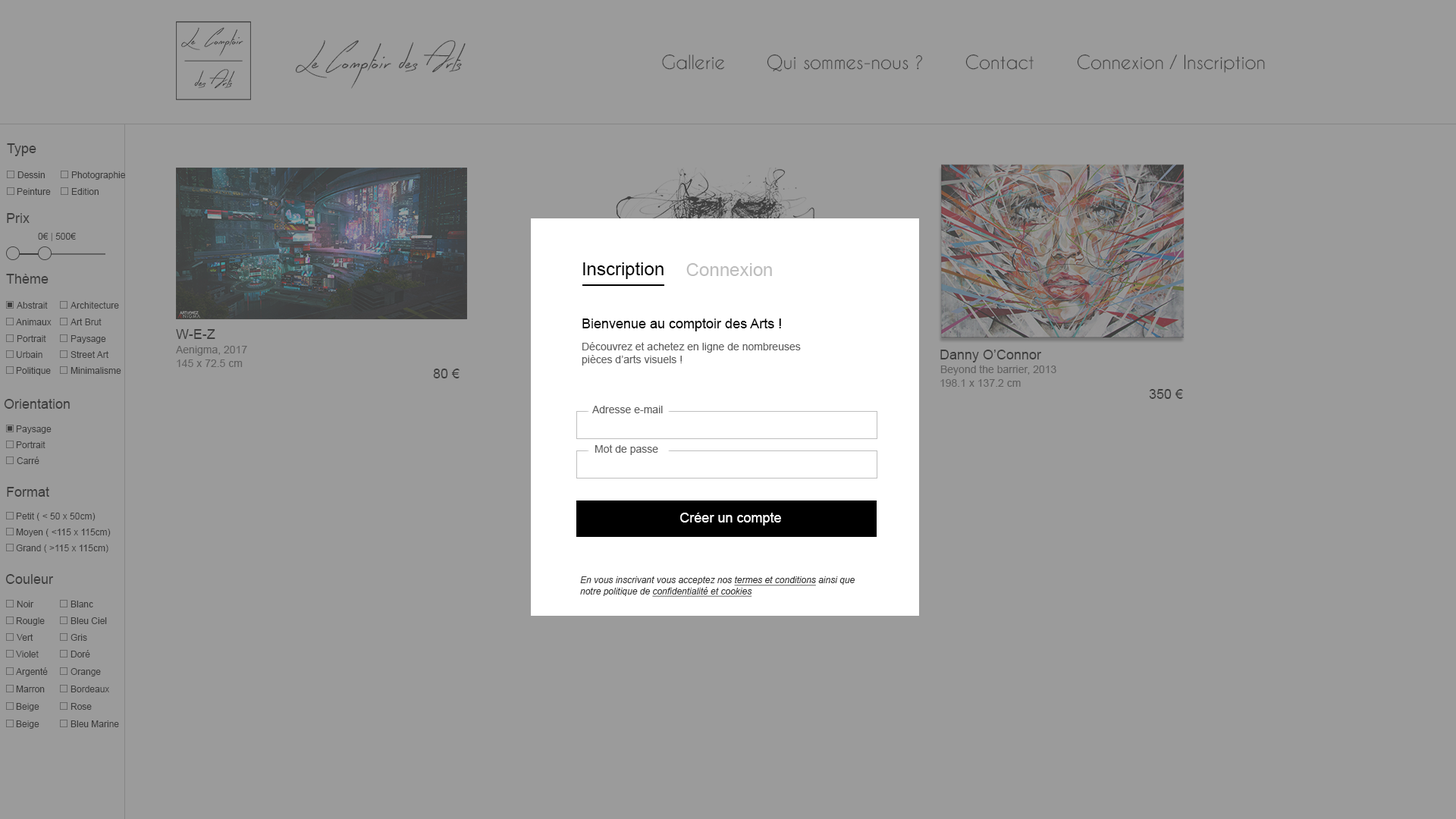
<style>
.page{position:relative;width:1456px;height:819px;background:#9b9b9b}
.page>*{position:absolute;margin:0}
.t1{font:33.4px "EarlyBird";color:#3d3d3d}
.t2{font:18.2px "CaviarDreams";color:#3d3d3d}
.t3{font:13.6px "ArialMT";color:#3d3d3d}
.t4{font:9.1px "ArialMT";color:#3d3d3d}
.t5{font:18.2px "ArialMT";color:#000000}
.t6{font:18.2px "ArialMT";color:#bebebe}
.t7{font:13.6px "ArialMT";color:#000000}
.t8{font:10.6px "ArialMT";color:#616161}
.t9{font:13.6px "ArialMT";color:#ffffff}
.t10{font:9.1px "Arial-ItalicMT";color:#363636}
.t11{font:9.1px "Arial-ItalicMT";color:#363636;text-decoration:underline}
</style>
<div class="page">
<p class="t1" style="left:295px;top:40px;width:171px;height:49px">Le Comptoir des Arts</p>
<p class="t2" style="left:662px;top:54px;width:63px;height:16px">Gallerie</p>
<p class="t2" style="left:767px;top:54px;width:156px;height:18px">Qui sommes-nous ?</p>
<p class="t2" style="left:965px;top:54px;width:69px;height:16px">Contact</p>
<p class="t2" style="left:1077px;top:54px;width:188px;height:19px">Connexion / Inscription</p>
<p class="t3" style="left:7px;top:143px;width:29px;height:13px">Type</p>
<p class="t4" style="left:17px;top:171px;width:28px;height:7px">Dessin</p>
<p class="t4" style="left:71px;top:171px;width:54px;height:9px">Photographie</p>
<p class="t4" style="left:17px;top:188px;width:34px;height:7px">Peinture</p>
<p class="t4" style="left:71px;top:188px;width:28px;height:7px">Edition</p>
<p class="t3" style="left:7px;top:213px;width:23px;height:10px">Prix</p>
<p class="t4" style="left:38px;top:233px;width:38px;height:8px">0€ | 500€</p>
<p class="t5" style="left:583px;top:262px;width:81px;height:17px">Inscription</p>
<p class="t6" style="left:686px;top:263px;width:86px;height:13px">Connexion</p>
<p class="t3" style="left:6px;top:274px;width:43px;height:10px">Thème</p>
<p class="t4" style="left:17px;top:302px;width:31px;height:7px">Abstrait</p>
<p class="t4" style="left:71px;top:302px;width:48px;height:7px">Architecture</p>
<p class="t4" style="left:16px;top:318px;width:36px;height:7px">Animaux</p>
<p class="t4" style="left:71px;top:318px;width:31px;height:7px">Art Brut</p>
<p class="t3" style="left:176px;top:329px;width:39px;height:10px">W-E-Z</p>
<p class="t7" style="left:582px;top:318px;width:199px;height:13px">Bienvenue au comptoir des Arts !</p>
<p class="t4" style="left:17px;top:335px;width:29px;height:7px">Portrait</p>
<p class="t4" style="left:71px;top:335px;width:35px;height:9px">Paysage</p>
<p class="t4" style="left:16px;top:351px;width:26px;height:7px">Urbain</p>
<p class="t4" style="left:71px;top:351px;width:37px;height:7px">Street Art</p>
<p class="t8" style="left:176px;top:346px;width:71px;height:10px">Aenigma, 2017</p>
<p class="t8" style="left:582px;top:342px;width:219px;height:24px">Découvrez et achetez en ligne de nombreuses pièces d’arts visuels !</p>
<p class="t3" style="left:940px;top:350px;width:102px;height:12px">Danny O’Connor</p>
<p class="t8" style="left:177px;top:359px;width:66px;height:8px">145 x 72.5 cm</p>
<p class="t8" style="left:940px;top:365px;width:116px;height:10px">Beyond the barrier, 2013</p>
<p class="t4" style="left:16px;top:367px;width:35px;height:8px">Politique</p>
<p class="t4" style="left:71px;top:367px;width:50px;height:7px">Minimalisme</p>
<p class="t3" style="left:433px;top:369px;width:27px;height:9px">80 €</p>
<p class="t8" style="left:940px;top:379px;width:81px;height:8px">198.1 x 137.2 cm</p>
<p class="t3" style="left:1149px;top:389px;width:34px;height:10px">350 €</p>
<p class="t3" style="left:4px;top:399px;width:66px;height:10px">Orientation</p>
<p class="t8" style="left:592px;top:406px;width:71px;height:7px">Adresse e-mail</p>
<p class="t4" style="left:16px;top:425px;width:36px;height:9px">Paysage</p>
<p class="t4" style="left:16px;top:441px;width:29px;height:7px">Portrait</p>
<p class="t8" style="left:595px;top:444px;width:63px;height:11px">Mot de passe</p>
<p class="t4" style="left:17px;top:457px;width:22px;height:7px">Carré</p>
<p class="t3" style="left:7px;top:487px;width:42px;height:10px">Format</p>
<p class="t4" style="left:16px;top:513px;width:80px;height:8px">Petit ( &lt; 50 x 50cm)</p>
<p class="t9" style="left:680px;top:513px;width:101px;height:13px">Créer un compte</p>
<p class="t4" style="left:16px;top:529px;width:95px;height:8px">Moyen ( &lt;115 x 115cm)</p>
<p class="t4" style="left:16px;top:544px;width:92px;height:9px">Grand ( &gt;115 x 115cm)</p>
<p class="t3" style="left:5px;top:574px;width:49px;height:10px">Couleur</p>
<p class="t10" style="left:580px;top:576px;width:275px;height:21px">En vous inscrivant vous acceptez nos <span class="t11">termes et conditions</span> ainsi que notre politique de <span class="t11">confidentialité et cookies</span></p>
<p class="t4" style="left:17px;top:601px;width:17px;height:6px">Noir</p>
<p class="t4" style="left:71px;top:601px;width:22px;height:6px">Blanc</p>
<p class="t4" style="left:16px;top:617px;width:29px;height:9px">Rougle</p>
<p class="t4" style="left:71px;top:617px;width:36px;height:7px">Bleu Ciel</p>
<p class="t4" style="left:17px;top:634px;width:16px;height:7px">Vert</p>
<p class="t4" style="left:71px;top:634px;width:16px;height:7px">Gris</p>
<p class="t4" style="left:16px;top:651px;width:23px;height:6px">Violet</p>
<p class="t4" style="left:71px;top:650px;width:19px;height:7px">Doré</p>
<p class="t4" style="left:16px;top:667px;width:32px;height:9px">Argenté</p>
<p class="t4" style="left:71px;top:668px;width:30px;height:8px">Orange</p>
<p class="t4" style="left:16px;top:686px;width:29px;height:6px">Marron</p>
<p class="t4" style="left:71px;top:686px;width:38px;height:6px">Bordeaux</p>
<p class="t4" style="left:16px;top:703px;width:23px;height:8px">Beige</p>
<p class="t4" style="left:71px;top:703px;width:21px;height:7px">Rose</p>
<p class="t4" style="left:16px;top:720px;width:23px;height:9px">Beige</p>
<p class="t4" style="left:71px;top:720px;width:48px;height:7px">Bleu Marine</p>
</div>
